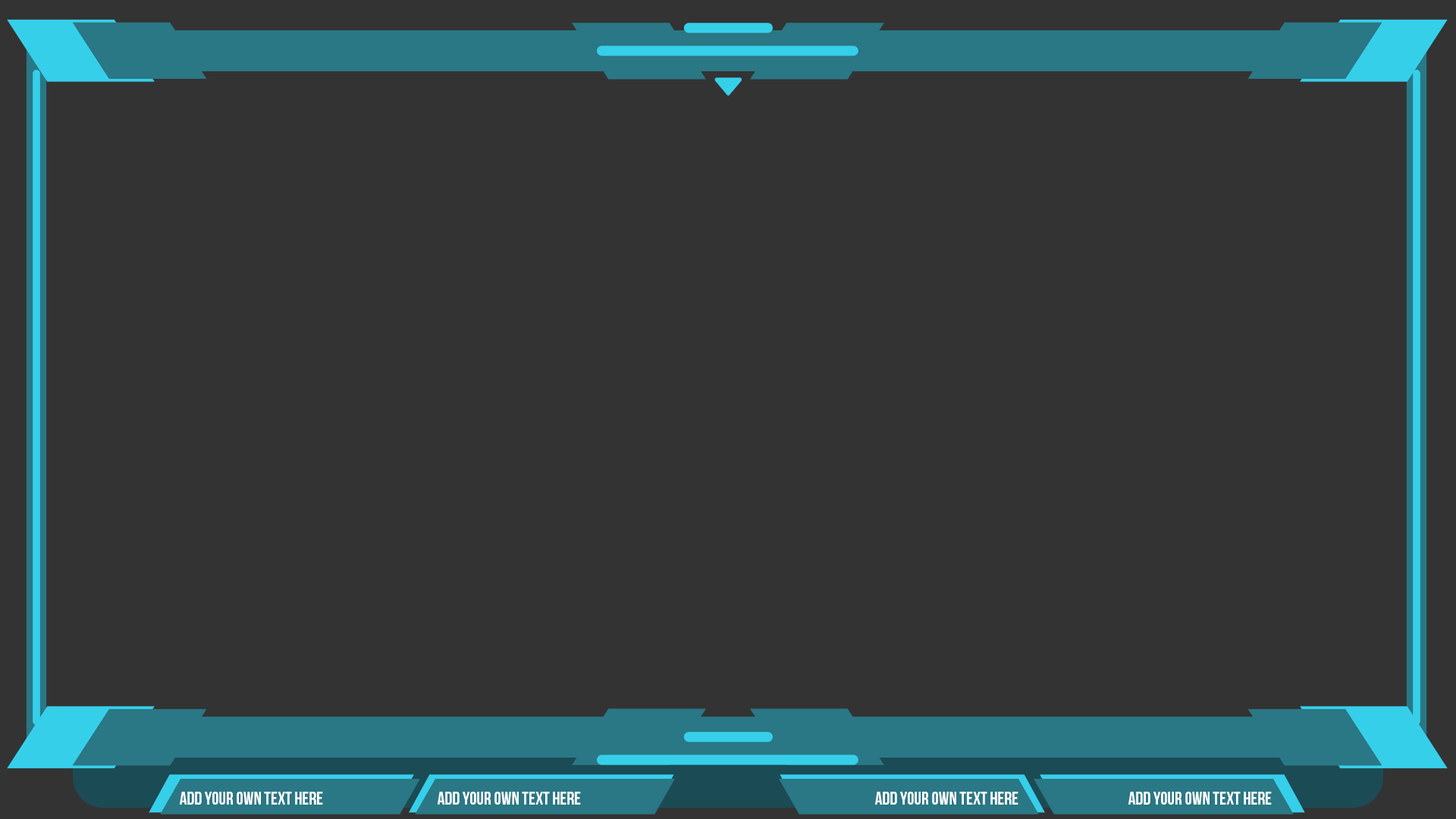
<style>
.page{position:relative;width:1456px;height:819px;background:#333333}
.page>*{position:absolute;margin:0}
.t1{font:18.2px "BebasNeue";color:#ffffff}
</style>
<div class="page">
<p class="t1" style="left:180px;top:792px;width:143px;height:13px">Add Your Own Text Here</p>
<p class="t1" style="left:438px;top:792px;width:143px;height:13px">Add Your Own Text Here</p>
<p class="t1" style="left:875px;top:792px;width:143px;height:13px">Add Your Own Text Here</p>
<p class="t1" style="left:1128px;top:792px;width:144px;height:13px">Add Your Own Text Here</p>
</div>
